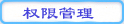
<style>
.page{position:relative;width:124px;height:24px}
.page>*{position:absolute;margin:0}
.t1{font:18px "LiSu";color:#4744da}
</style>
<div class="page">
<p class="t1" style="left:22px;top:7px;width:72px;height:12px">权限管理</p>
</div>
